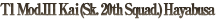
<style>
.page{position:relative;width:217px;height:19px;background:#ffffff}
.page>*{position:absolute;margin:0}
.t1{font:16px "RyuminPro-ExBold";letter-spacing:-0.12em;color:#4a3f32;font-weight:bold;scale:0.8 1}
</style>
<div class="page">
<p class="t1" style="left:0px;top:2px;width:216px;height:17px">T1 Mod.III Kai (Sk. 20th Squad.) Hayabusa</p>
</div>
